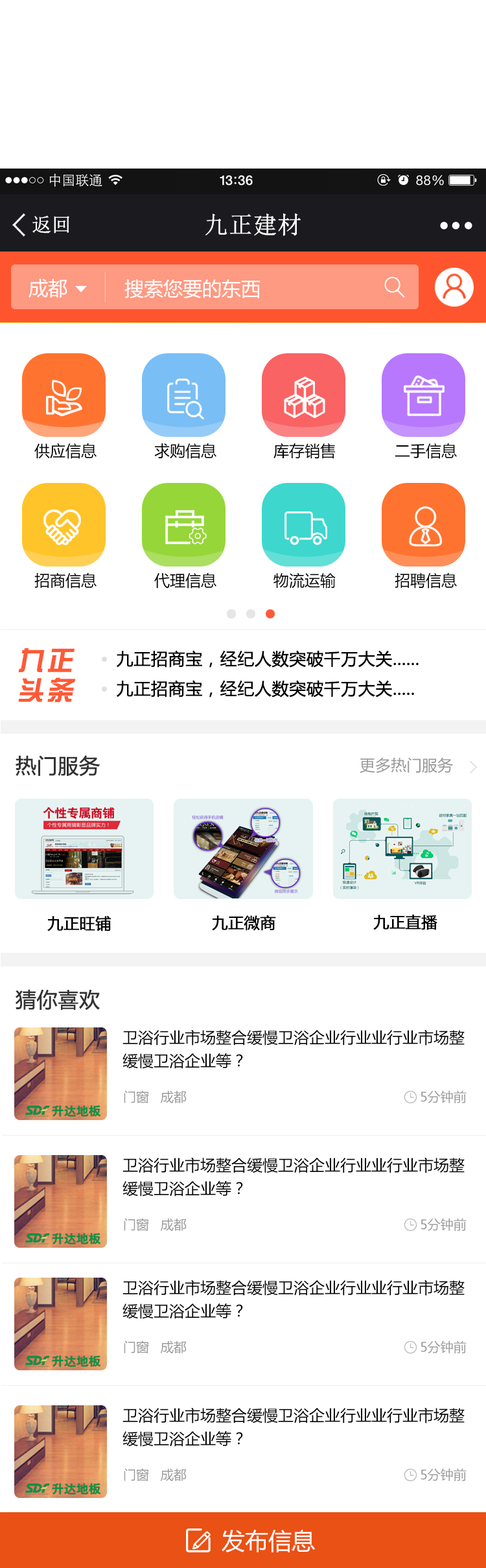
<style>
.page{position:relative;width:486px;height:1568px;background:#ffffff}
.page>*{position:absolute;margin:0}
.t1{font:19.4px "NSimSun";color:#ffffff;font-weight:bold}
.t2{font:23.8px "NSimSun";color:#ffffff;font-weight:bold}
.t3{font:19.4px "MicrosoftYaHei";color:#ffffff}
.t4{font:15.6px "MicrosoftYaHei";color:#000000}
.t5{font:25.9px/29.8px "HYk1gj";letter-spacing:0.1em;color:#fd5a37;font-weight:bold;font-style:italic}
.t6{font:16.9px "MicrosoftYaHei";color:#000000;font-weight:bold}
.t7{font:20.7px "MicrosoftYaHei";color:#333333;font-weight:bold}
.t8{font:15.6px "MicrosoftYaHei";color:#999999}
.t9{font:15.6px "MicrosoftYaHei";color:#000000;font-weight:bold}
.t10{font:15.6px/23.3px "MicrosoftYaHei";color:#000000}
.t11{font:13px "MicrosoftYaHei";color:#999999}
.t12{font:23.3px "MicrosoftYaHei";color:#ffffff}
</style>
<div class="page">
<p class="t1" style="left:32px;top:215px;width:37px;height:18px">返回</p>
<p class="t2" style="left:205px;top:213px;width:96px;height:23px">九正建材</p>
<p class="t3" style="left:29px;top:279px;width:38px;height:19px">成都</p>
<p class="t3" style="left:124px;top:279px;width:137px;height:20px">搜索您要的东西</p>
<p class="t4" style="left:34px;top:443px;width:63px;height:16px">供应信息</p>
<p class="t4" style="left:154px;top:443px;width:62px;height:16px">求购信息</p>
<p class="t4" style="left:274px;top:443px;width:62px;height:16px">库存销售</p>
<p class="t4" style="left:395px;top:443px;width:62px;height:16px">二手信息</p>
<p class="t4" style="left:34px;top:572px;width:63px;height:17px">招商信息</p>
<p class="t4" style="left:154px;top:572px;width:62px;height:17px">代理信息</p>
<p class="t4" style="left:274px;top:572px;width:62px;height:17px">物流运输</p>
<p class="t4" style="left:395px;top:572px;width:62px;height:17px">招聘信息</p>
<p class="t5" style="left:18px;top:648px;width:58px;height:55px">九正<br>头条</p>
<p class="t6" style="left:117px;top:650px;width:302px;height:18px">九正招商宝，经纪人数突破千万大关......</p>
<p class="t6" style="left:117px;top:680px;width:297px;height:17px">九正招商宝，经纪人数突破千万大关.....</p>
<p class="t7" style="left:16px;top:755px;width:84px;height:22px">热门服务</p>
<p class="t8" style="left:360px;top:757px;width:93px;height:16px">更多热门服务</p>
<p class="t9" style="left:47px;top:916px;width:64px;height:15px">九正旺铺</p>
<p class="t9" style="left:212px;top:915px;width:64px;height:16px">九正微商</p>
<p class="t9" style="left:373px;top:915px;width:65px;height:15px">九正直播</p>
<p class="t7" style="left:16px;top:989px;width:84px;height:22px">猜你喜欢</p>
<p class="t10" style="left:123px;top:1029px;width:342px;height:40px">卫浴行业市场整合缓慢卫浴企业行业业行业市场整<br>缓慢卫浴企业等？</p>
<p class="t11" style="left:124px;top:1090px;width:63px;height:13px">门窗   成都</p>
<p class="t11" style="left:421px;top:1090px;width:46px;height:13px">5分钟前</p>
<p class="t10" style="left:123px;top:1157px;width:342px;height:40px">卫浴行业市场整合缓慢卫浴企业行业业行业市场整<br>缓慢卫浴企业等？</p>
<p class="t11" style="left:124px;top:1218px;width:63px;height:13px">门窗   成都</p>
<p class="t11" style="left:421px;top:1218px;width:46px;height:13px">5分钟前</p>
<p class="t10" style="left:123px;top:1280px;width:342px;height:39px">卫浴行业市场整合缓慢卫浴企业行业业行业市场整<br>缓慢卫浴企业等？</p>
<p class="t11" style="left:124px;top:1340px;width:63px;height:13px">门窗   成都</p>
<p class="t11" style="left:421px;top:1340px;width:46px;height:13px">5分钟前</p>
<p class="t10" style="left:123px;top:1407px;width:342px;height:40px">卫浴行业市场整合缓慢卫浴企业行业业行业市场整<br>缓慢卫浴企业等？</p>
<p class="t11" style="left:124px;top:1468px;width:63px;height:13px">门窗   成都</p>
<p class="t11" style="left:421px;top:1468px;width:46px;height:13px">5分钟前</p>
<p class="t12" style="left:222px;top:1529px;width:93px;height:23px">发布信息</p>
</div>
